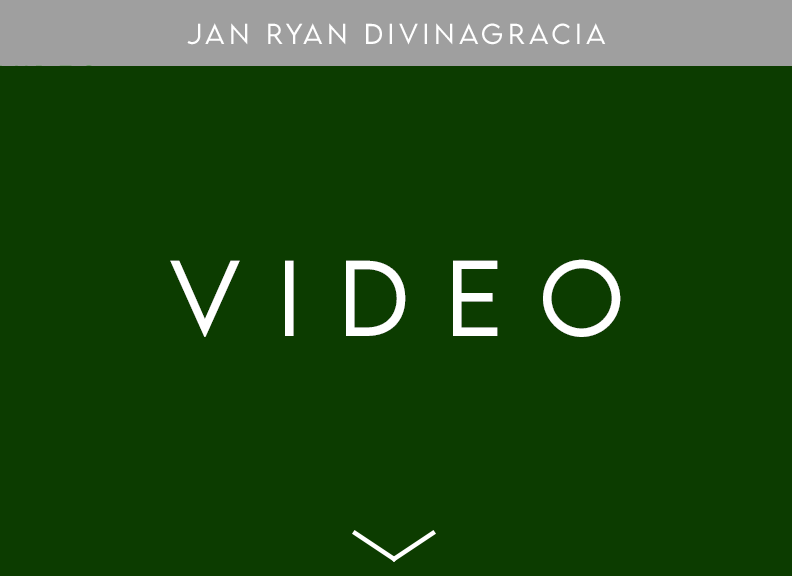
<style>
.page{position:relative;width:792px;height:576px;background:#0c3c00}
.page>*{position:absolute;margin:0}
.t1{font:25.6px "LEMONMILK-Light";letter-spacing:0.18em;color:#ffffff}
.t2{font:95.6px "LEMONMILK-Light";letter-spacing:0.38em;color:#ffffff}
</style>
<div class="page">
<p class="t1" style="left:187px;top:23px;width:419px;height:22px">Jan Ryan Divinagracia</p>
<p class="t2" style="left:170px;top:259px;width:451px;height:78px">VIdeo</p>
</div>
